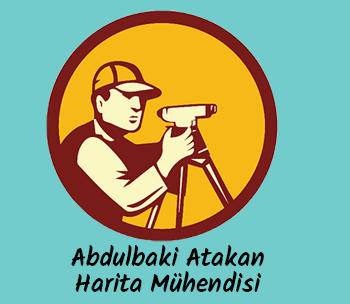
<style>
.page{position:relative;width:350px;height:304px;background:#72cccc}
.page>*{position:absolute;margin:0}
.t1{font:25.9px/26.1px "Kalam-Bold";letter-spacing:0.003em;color:#000000}
</style>
<div class="page">
<p class="t1" style="left:71px;top:245px;width:193px;height:47px;text-align:center">Abdulbaki Atakan<br>Harita Mühendisi</p>
</div>
